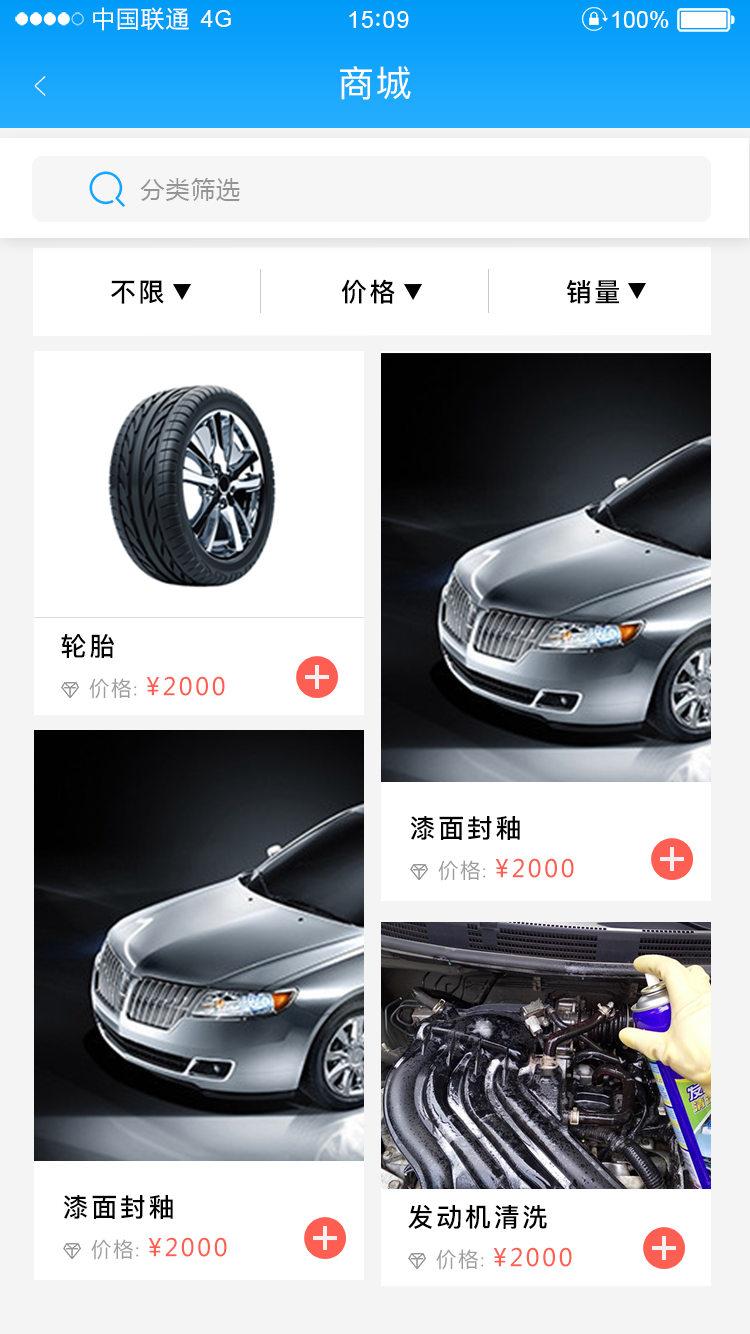
<style>
.page{position:relative;width:750px;height:1334px;background:#ffffff}
.page>*{position:absolute;margin:0}
.t1{font:23.4px "MicrosoftYaHei";letter-spacing:0.06em;color:#ffffff}
.t2{font:23.4px "ArialMT";letter-spacing:0.02em;color:#ffffff}
.t3{font:23.4px "ArialMT";letter-spacing:0.04em;color:#ffffff}
.t4{font:23.4px "ArialMT";color:#ffffff}
.t5{font:39px "PingFang-SC-ExtraLight";letter-spacing:0.1em;color:#ffffff;scale:0.51 1}
.t6{font:36px "PingFang-SC-Medium";letter-spacing:0.05em;color:#ffffff}
.t7{font:24px "MicrosoftYaHei";letter-spacing:0.05em;color:#959595}
.t8{font:26px "PingFang-SC-Bold";letter-spacing:0.1em;color:#000000}
.t9{font:25.7px "PingFang-SC-Bold";letter-spacing:0.1em;color:#000000}
.t10{font:24px "MicrosoftYaHei";letter-spacing:0.1em;color:#ff5f53}
.t11{font:20px "MicrosoftYaHei";letter-spacing:0.1em;color:#9d9d9d}
.t12{font:16px "MicrosoftYaHei";letter-spacing:0.1em;color:#9d9d9d}
</style>
<div class="page">
<p class="t1" style="left:93px;top:7px;width:96px;height:24px">中国联通</p>
<p class="t2" style="left:200px;top:10px;width:31px;height:17px">4G</p>
<p class="t3" style="left:349px;top:11px;width:60px;height:17px">15 09</p>
<p class="t4" style="left:612px;top:11px;width:57px;height:17px">100%</p>
<p class="t5" style="left:34px;top:76px;width:12px;height:20px;rotate:180deg">&gt;</p>
<p class="t6" style="left:340px;top:66px;width:71px;height:34px">商城</p>
<p class="t7" style="left:140px;top:178px;width:100px;height:23px">分类筛选</p>
<p class="t8" style="left:111px;top:280px;width:53px;height:24px">不限</p>
<p class="t8" style="left:342px;top:279px;width:53px;height:25px">价格</p>
<p class="t9" style="left:566px;top:280px;width:53px;height:24px">销量</p>
<p class="t8" style="left:61px;top:634px;width:54px;height:24px">轮胎</p>
<p class="t10" style="left:89px;top:676px;width:136px;height:23px"><span class="t11">价格</span><span class="t12">: </span>¥2000</p>
<p class="t8" style="left:410px;top:816px;width:110px;height:24px">漆面封釉</p>
<p class="t10" style="left:438px;top:858px;width:136px;height:23px"><span class="t11">价格</span><span class="t12">: </span>¥2000</p>
<p class="t8" style="left:63px;top:1195px;width:110px;height:24px">漆面封釉</p>
<p class="t8" style="left:408px;top:1204px;width:139px;height:25px">发动机清洗</p>
<p class="t10" style="left:91px;top:1237px;width:136px;height:23px"><span class="t11">价格</span><span class="t12">: </span>¥2000</p>
<p class="t10" style="left:436px;top:1247px;width:136px;height:23px"><span class="t11">价格</span><span class="t12">: </span>¥2000</p>
</div>
